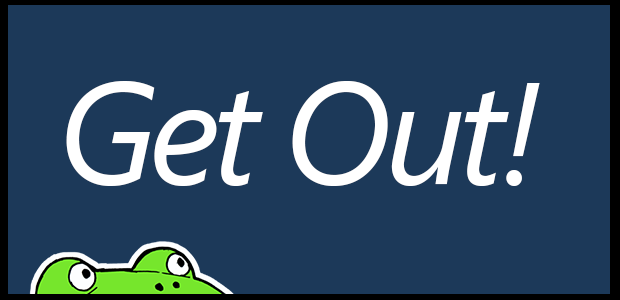
<style>
.page{position:relative;width:620px;height:300px;background:#1c3959}
.page>*{position:absolute;margin:0}
.t1{font:144px "SegoeUI-Italic";letter-spacing:-0.05em;color:#ffffff}
</style>
<div class="page">
<p class="t1" style="left:66px;top:81px;width:474px;height:105px">Get Out!</p>
</div>
